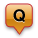
<style>
.page{position:relative;width:38px;height:38px;background:#ffffff}
.page>*{position:absolute;margin:0}
.t1{font:15.9px "HelveticaNeue-Bold";color:#000000}
</style>
<div class="page">
<p class="t1" style="left:13px;top:9px;width:12px;height:13px">Q</p>
</div>
